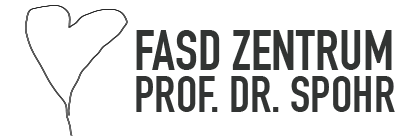
<style>
.page{position:relative;width:400px;height:140px;background:#ffffff}
.page>*{position:absolute;margin:0}
.t1{font:56.5px "DINCondensed-Bold";color:#323433}
.t2{font:50.4px "DINCondensed-Bold";color:#323433}
</style>
<div class="page">
<p class="t1" style="left:136px;top:30px;width:256px;height:40px">FASD ZENTRUM</p>
<p class="t2" style="left:136px;top:76px;width:259px;height:36px">PROF. DR. SPOHR</p>
</div>
